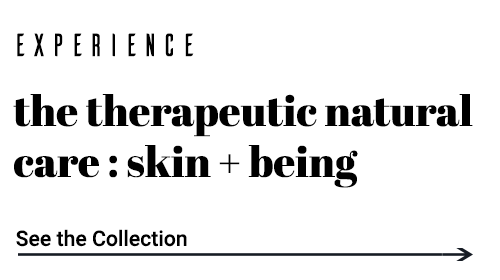
<style>
.page{position:relative;width:500px;height:280px;background:#ffffff}
.page>*{position:absolute;margin:0}
.t1{font:31.8px "Ailerons-Regular";color:#000000}
.t2{font:42.4px "AbrilFatface-Regular";color:#000000}
.t3{font:21.2px "Roboto-Medium";color:#000000}
</style>
<div class="page">
<p class="t1" style="left:17px;top:33px;width:177px;height:24px">EXPERIENCE</p>
<p class="t2" style="left:13px;top:94px;width:460px;height:94px">the therapeutic natural<br>care : skin + being</p>
<p class="t3" style="left:16px;top:229px;width:171px;height:18px">See the Collection</p>
</div>
